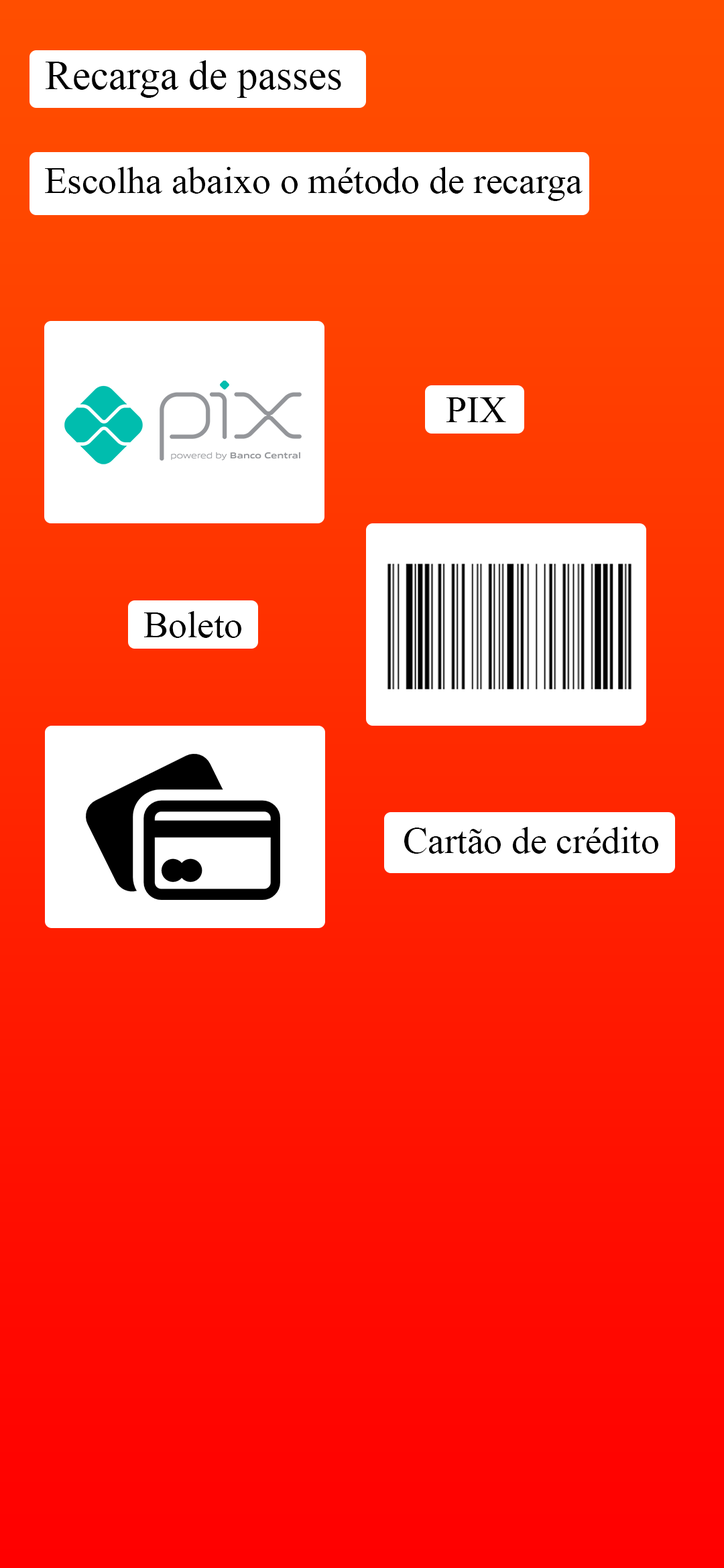
<style>
.page{position:relative;width:724px;height:1568px}
.page>*{position:absolute;margin:0}
.t1{font:40.9px "TimesNewRomanPSMT";color:#000000}
.t2{font:37.2px "TimesNewRomanPSMT";color:#000000}
</style>
<div class="page">
<p class="t1" style="left:46px;top:60px;width:295px;height:38px">Recarga de passes</p>
<p class="t2" style="left:45px;top:167px;width:537px;height:34px">Escolha abaixo o método de recarga</p>
<p class="t2" style="left:446px;top:397px;width:60px;height:25px">PIX</p>
<p class="t2" style="left:144px;top:611px;width:97px;height:27px">Boleto</p>
<p class="t2" style="left:404px;top:827px;width:254px;height:27px">Cartão de crédito</p>
</div>
